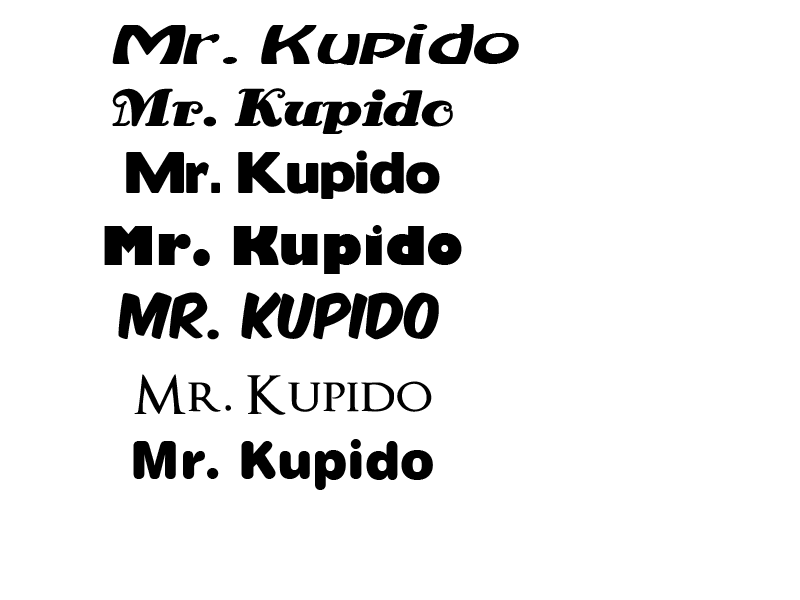
<style>
.page{position:relative;width:800px;height:600px;background:#ffffff}
.page>*{position:absolute;margin:0}
.t1{font:52.2px "Batavia-Ext";color:#000000}
.t2{font:52.2px "AntsyPants";color:#000000}
.t3{font:52.2px "BorisBlackBloxx";color:#000000}
.t4{font:52.2px "GillSans-UltraBold";color:#000000}
.t5{font:52.2px "KomikaTitle-Axis";color:#000000}
.t6{font:52.2px "OptimusPrincepsSemiBold";color:#000000}
.t7{font:52.2px "Swiss721BlackRoundedHUNormal";color:#000000}
</style>
<div class="page">
<p class="t1" style="left:112px;top:24px;width:407px;height:41px">Mr. Kupido</p>
<p class="t2" style="left:112px;top:88px;width:341px;height:46px">Mr. Kupido</p>
<p class="t3" style="left:126px;top:150px;width:314px;height:49px">Mr. Kupido</p>
<p class="t4" style="left:104px;top:225px;width:358px;height:49px">Mr. Kupido</p>
<p class="t5" style="left:118px;top:292px;width:321px;height:48px">Mr. Kupido</p>
<p class="t6" style="left:134px;top:374px;width:298px;height:41px">Mr. Kupido</p>
<p class="t7" style="left:133px;top:439px;width:300px;height:51px">Mr. Kupido</p>
</div>
